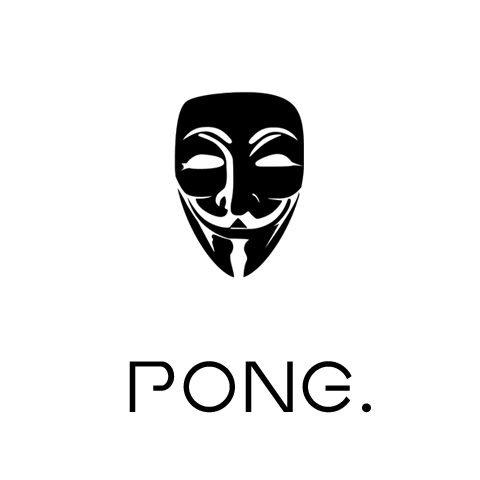
<style>
.page{position:relative;width:480px;height:480px;background:#ffffff}
.page>*{position:absolute;margin:0}
.t1{font:81.1px "EarthOrbiter";color:#000000}
</style>
<div class="page">
<p class="t1" style="left:129px;top:361px;width:242px;height:52px">PONG.</p>
</div>
